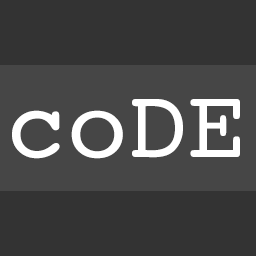
<style>
.page{position:relative;width:256px;height:256px;background:#333333}
.page>*{position:absolute;margin:0}
.t1{font:100px "Courier";color:#ffffff}
</style>
<div class="page">
<p class="t1" style="left:12px;top:99px;width:228px;height:60px">coDE</p>
</div>
